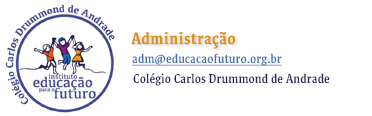
<style>
.page{position:relative;width:372px;height:116px;background:#ffffff}
.page>*{position:absolute;margin:0}
.t1{font:18px "Destra-Medium-TTF-Trial";color:#dc911b;font-weight:bold}
.t2{font:14px "Destra-Medium-TTF-Trial";color:#4470b4;text-decoration:underline}
.t3{font:14px "Destra-Medium-TTF-Trial";color:#2b275b}
</style>
<div class="page">
<p class="t1" style="left:131px;top:32px;width:104px;height:17px">Administração</p>
<p class="t2" style="left:132px;top:53px;width:150px;height:13px">adm@educacaofuturo.org.br</p>
<p class="t3" style="left:133px;top:73px;width:197px;height:13px">Colégio Carlos Drummond de Andrade</p>
</div>
